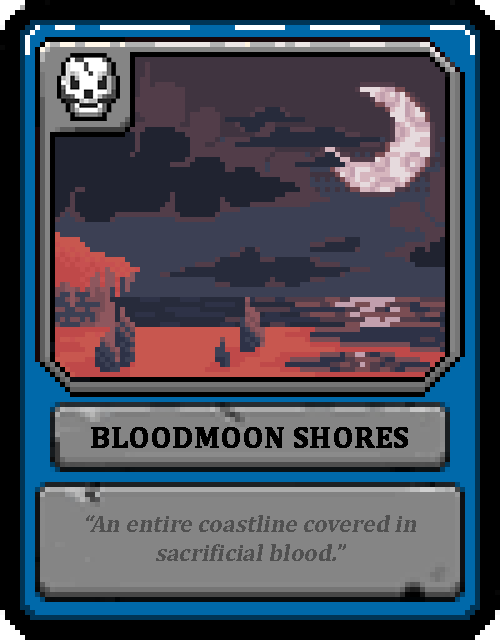
<style>
.page{position:relative;width:500px;height:640px;background:#000000}
.page>*{position:absolute;margin:0}
.t1{font:30px "Cambria-Bold";color:#000000;text-transform:uppercase;font-weight:bold}
.t2{font:24px "Cambria-Bold";color:#505050;font-style:italic}
</style>
<div class="page">
<p class="t1" style="left:91px;top:427px;width:317px;height:21px">Bloodmoon Shores</p>
<p class="t2" style="left:86px;top:515px;width:330px;height:46px;text-align:center">“An entire coastline covered in sacrificial blood.”</p>
</div>
